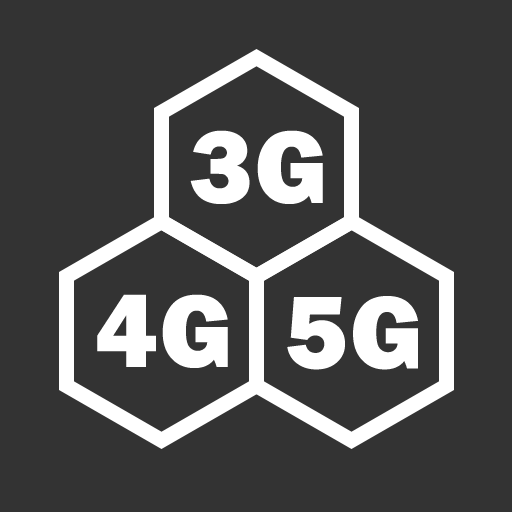
<style>
.page{position:relative;width:512px;height:512px;background:#333333}
.page>*{position:absolute;margin:0}
.t1{font:106.7px "FranklinGothic-Heavy";letter-spacing:0.025em;color:#ffffff}
</style>
<div class="page">
<p class="t1" style="left:190px;top:130px;width:133px;height:74px">3G</p>
<p class="t1" style="left:97px;top:294px;width:131px;height:74px">4G</p>
<p class="t1" style="left:287px;top:296px;width:131px;height:74px">5G</p>
</div>
